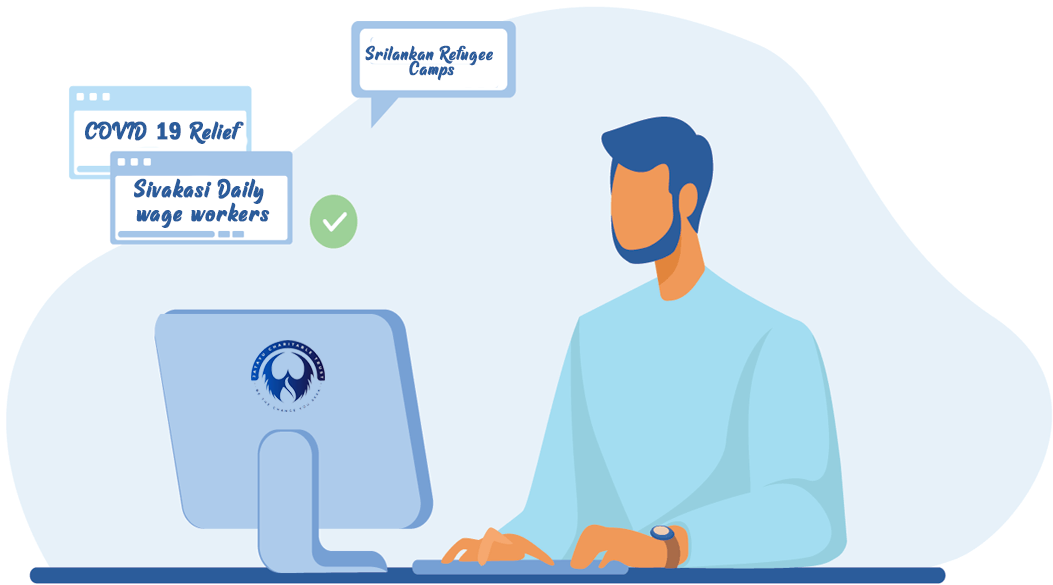
<style>
.page{position:relative;width:1053px;height:585px;background:#e7f1f9}
.page>*{position:absolute;margin:0}
.t1{font:20px/15px "RaphtaliaPersonalUseOnly";letter-spacing:0.02em;color:#2b5c9b;font-weight:bold}
.t2{font:25px "RaphtaliaPersonalUseOnly";letter-spacing:0.02em;color:#2b5c9b;font-weight:bold}
.t3{font:25px "FranklinGothic-DemiCond";letter-spacing:0.02em;color:#2b5c9b;font-weight:bold}
.t4{font:26px/24px "RaphtaliaPersonalUseOnly";letter-spacing:0.02em;color:#2b5c9b;font-weight:bold}
</style>
<div class="page">
<p class="t1" style="left:365px;top:45px;width:128px;height:36px;text-align:center">Srilankan Refugee <br>Camps</p>
<p class="t2" style="left:85px;top:121px;width:159px;height:23px">COVID <span class="t3">19</span> Relief</p>
<p class="t4" style="left:134px;top:178px;width:136px;height:50px;text-align:center">Sivakasi Daily <br>wage workers</p>
</div>
